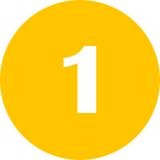
<style>
.page{position:relative;width:160px;height:160px;background:#ffc600}
.page>*{position:absolute;margin:0}
.t1{font:100px "BritannicBold";color:#ffffff}
</style>
<div class="page">
<p class="t1" style="left:63px;top:46px;width:34px;height:67px">1</p>
</div>
